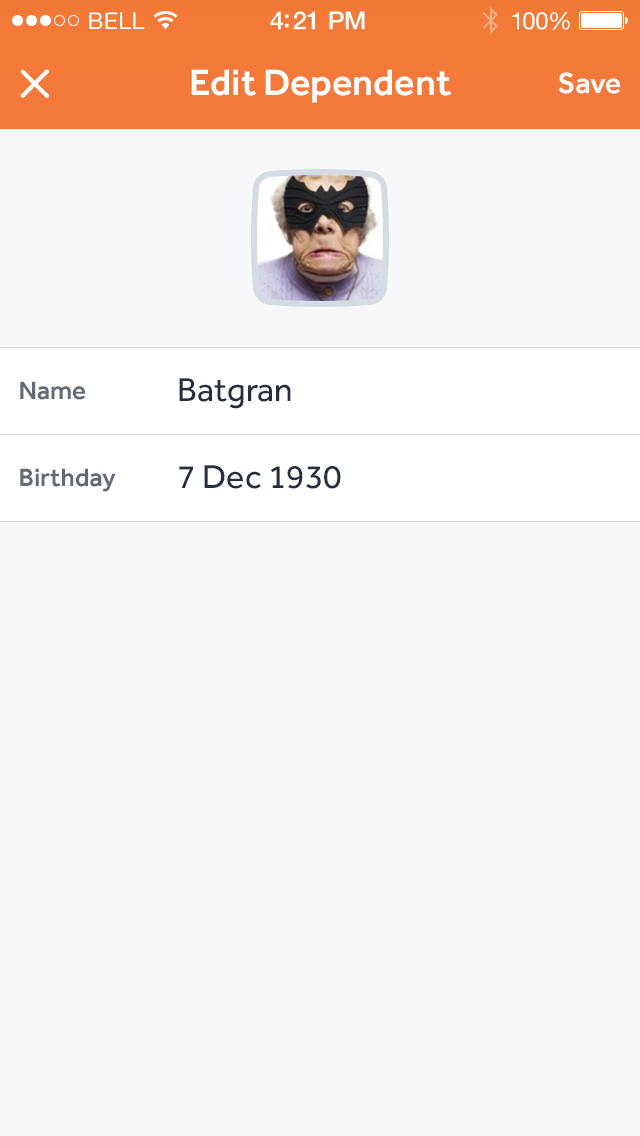
<style>
.page{position:relative;width:640px;height:1136px;background:#f6f8fa}
.page>*{position:absolute;margin:0}
.t1{font:23px "HelveticaNeue";letter-spacing:0.02em;color:#ffffff}
.t2{font:25px "HelveticaNeue-Medium";letter-spacing:-0.02em;color:#ffffff}
.t3{font:24px "HelveticaNeue";letter-spacing:-0.02em;color:#ffffff}
.t4{font:38px "Effra-Medium";color:#ffffff}
.t5{font:30px "Effra-Medium";color:#ffffff}
.t6{font:26px "Effra-Medium";color:#626a73}
.t7{font:34px "Effra-Regular";color:#22313f}
</style>
<div class="page">
<p class="t1" style="left:89px;top:12px;width:56px;height:17px">BELL</p>
<p class="t2" style="left:270px;top:11px;width:95px;height:19px">4:21 PM</p>
<p class="t3" style="left:512px;top:12px;width:58px;height:18px">100%</p>
<p class="t4" style="left:191px;top:69px;width:260px;height:34px">Edit Dependent</p>
<p class="t5" style="left:558px;top:72px;width:63px;height:22px">Save</p>
<p class="t6" style="left:20px;top:381px;width:66px;height:19px">Name</p>
<p class="t7" style="left:179px;top:378px;width:112px;height:31px">Batgran</p>
<p class="t6" style="left:20px;top:468px;width:96px;height:24px">Birthday</p>
<p class="t7" style="left:179px;top:465px;width:162px;height:24px">7 Dec 1930</p>
</div>
